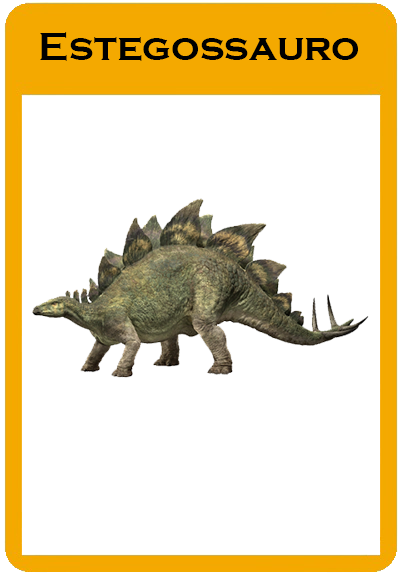
<style>
.page{position:relative;width:400px;height:575px;background:#ffffff}
.page>*{position:absolute;margin:0}
.t1{font:40px "CopperplateGothic-Bold";color:#000000}
</style>
<div class="page">
<p class="t1" style="left:40px;top:32px;width:318px;height:29px">Estegossauro</p>
</div>
